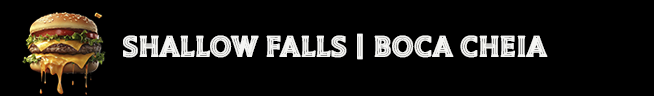
<style>
.page{position:relative;width:654px;height:96px;background:#000000}
.page>*{position:absolute;margin:0}
.t1{font:29px "TiltPrism-Regular";color:#f5f5f3;font-weight:bold}
</style>
<div class="page">
<p class="t1" style="left:123px;top:33px;width:425px;height:27px">SHALLOW FALLS | BOCA CHEIA</p>
</div>
